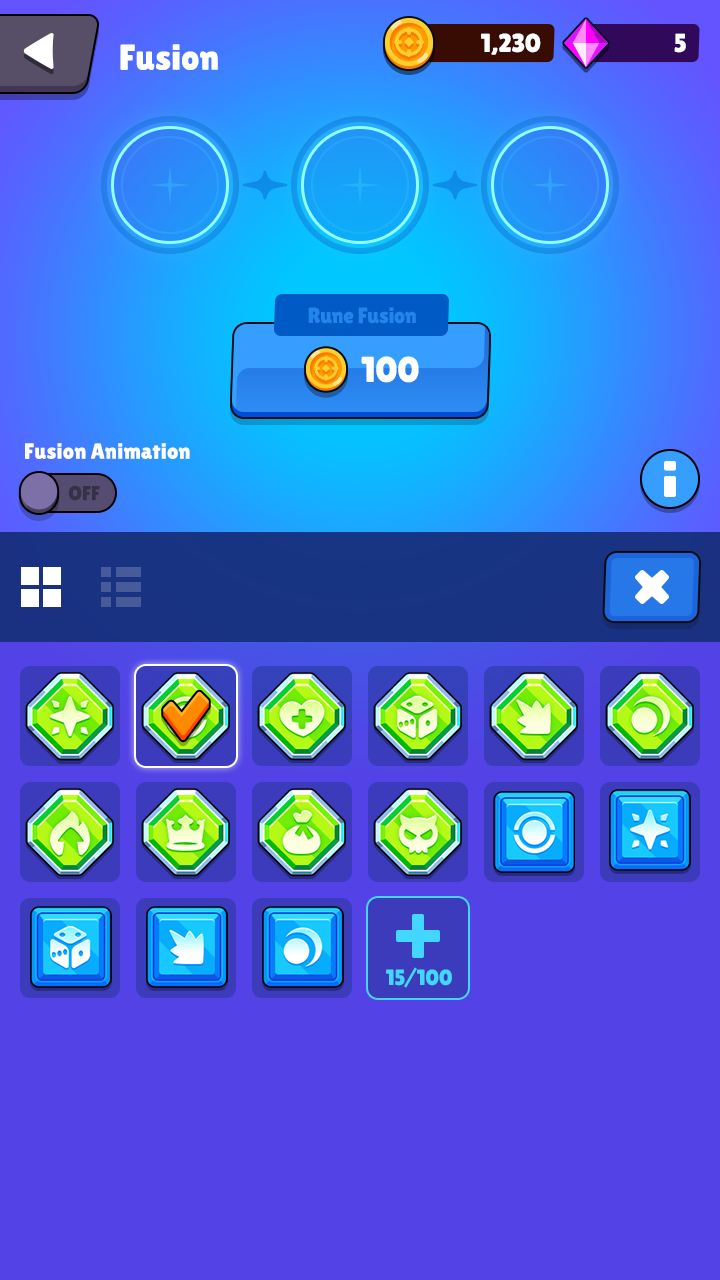
<style>
.page{position:relative;width:720px;height:1280px;background:#5343e6}
.page>*{position:absolute;margin:0}
.t1{font:26px "LilitaOne";letter-spacing:-0.01em;color:#ffffff;text-transform:uppercase}
.t2{font:36px "LilitaOne";color:#ffffff}
.t3{font:22px "LilitaOne";color:#2385e9}
.t4{font:36px "LilitaOne";color:#ffffff;text-transform:uppercase}
.t5{font:22px "LilitaOne";color:#ffffff}
.t6{font:20px "LilitaOne";color:#363146;text-transform:uppercase}
.t7{font:22px "LilitaOne";color:#43d6ff}
</style>
<div class="page">
<p class="t1" style="left:481px;top:33px;width:60px;height:22px">1,230</p>
<p class="t1" style="left:674px;top:33px;width:12px;height:20px">5</p>
<p class="t2" style="left:120px;top:44px;width:98px;height:26px">Fusion</p>
<p class="t3" style="left:308px;top:307px;width:108px;height:17px">Rune Fusion</p>
<p class="t4" style="left:361px;top:356px;width:58px;height:27px">100</p>
<p class="t5" style="left:25px;top:443px;width:165px;height:16px">Fusion Animation</p>
<p class="t6" style="left:68px;top:485px;width:32px;height:16px">off</p>
<p class="t7" style="left:386px;top:967px;width:66px;height:21px">15/100</p>
</div>
